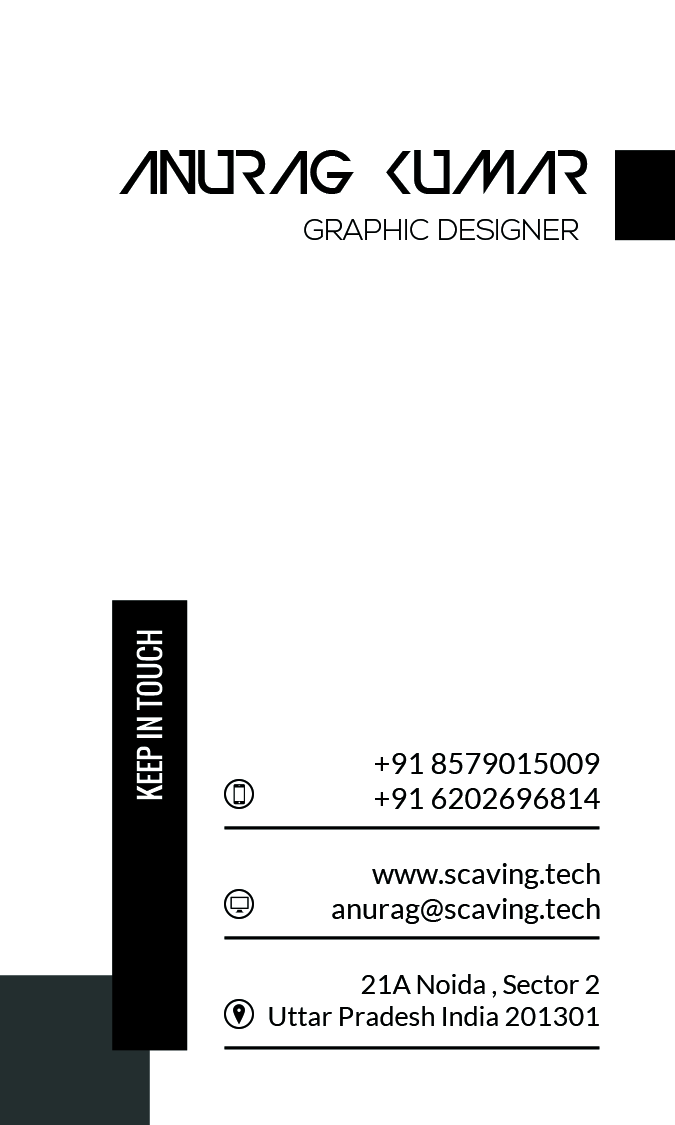
<style>
.page{position:relative;width:675px;height:1125px;background:#ffffff}
.page>*{position:absolute;margin:0}
.t1{font:58.3px "DevilBreezeMedium";color:#000000;text-transform:uppercase}
.t2{font:29.2px "NexaLight";color:#000000;text-transform:uppercase}
.t3{font:29.2px "Oswald-Regular";color:#ffffff;text-transform:uppercase}
.t4{font:29.2px "Lato-Regular";color:#000000;text-transform:uppercase}
.t5{font:29.2px "Lato-Regular";color:#000000}
.t6{font:27.1px "Lato-Regular";color:#000000}
</style>
<div class="page">
<p class="t1" style="left:119px;top:150px;width:469px;height:44px">ANURAG KUMAR</p>
<p class="t2" style="left:304px;top:219px;width:275px;height:21px">graphic designer</p>
<p class="t3" style="left:136px;top:630px;width:27px;height:170px;rotate:-90deg">keep in touch</p>
<p class="t4" style="left:375px;top:753px;width:225px;height:56px;text-align:right">+91 8579015009<br>+91 6202696814</p>
<p class="t5" style="left:332px;top:863px;width:268px;height:61px;text-align:right">www.scaving.tech<br>anurag@scaving.tech</p>
<p class="t6" style="left:269px;top:974px;width:330px;height:52px;text-align:right">21A Noida , Sector 2<br>Uttar Pradesh India 201301</p>
</div>
